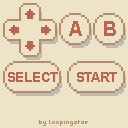
<style>
.page{position:relative;width:128px;height:128px;background:#ede3c7}
.page>*{position:absolute;margin:0}
.t1{font:20px "Arial-BoldMT";letter-spacing:-0.02em;color:#c0624d}
.t2{font:14px "Arial-BoldMT";letter-spacing:-0.02em;color:#c0624d}
</style>
<div class="page">
<p class="t1" style="left:69px;top:21px;width:13px;height:15px">A</p>
<p class="t1" style="left:104px;top:21px;width:12px;height:15px">B</p>
<p class="t2" style="left:8px;top:72px;width:50px;height:10px">SELECT</p>
<p class="t2" style="left:77px;top:72px;width:40px;height:10px">START</p>
</div>
